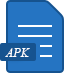
<style>
.page{position:relative;width:64px;height:73px;background:#2574c2}
.page>*{position:absolute;margin:0}
.t1{font:12px "TimesNewRomanPS-ItalicMT";color:#ffffff}
</style>
<div class="page">
<p class="t1" style="left:5px;top:48px;width:25px;height:9px">APK</p>
</div>
